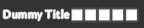
<style>
.page{position:relative;width:144px;height:28px;background:#333333}
.page>*{position:absolute;margin:0}
.t1{font:11px "Amira-Roman";letter-spacing:0.05em;color:#ffffff}
</style>
<div class="page">
<p class="t1" style="left:3px;top:9px;width:66px;height:12px">Dummy Title</p>
</div>
